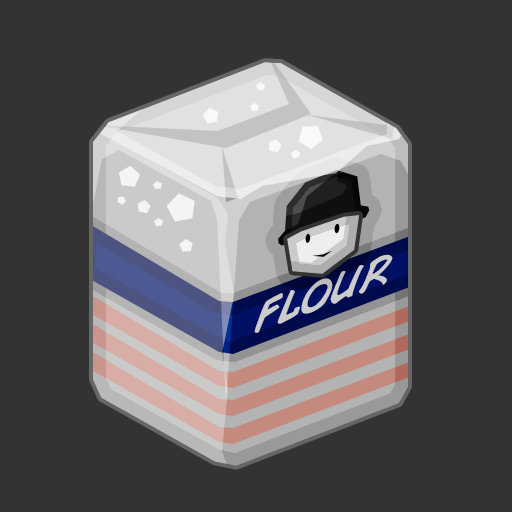
<style>
.page{position:relative;width:512px;height:512px;background:#333333}
.page>*{position:absolute;margin:0}
.t1{font:40.1px "ComicBook-Italic";letter-spacing:-0.04em;color:#cccccc;scale:1.04 1}
</style>
<div class="page">
<p class="t1" style="left:254px;top:254px;width:139px;height:79px;rotate:-21deg">FLOUR</p>
</div>
